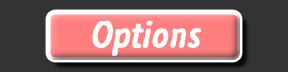
<style>
.page{position:relative;width:288px;height:72px;background:#333333}
.page>*{position:absolute;margin:0}
.t1{font:36.8px "SegoeMarker";color:#ffffff;font-weight:bold;font-style:italic}
</style>
<div class="page">
<p class="t1" style="left:92px;top:20px;width:109px;height:36px">Options</p>
</div>
